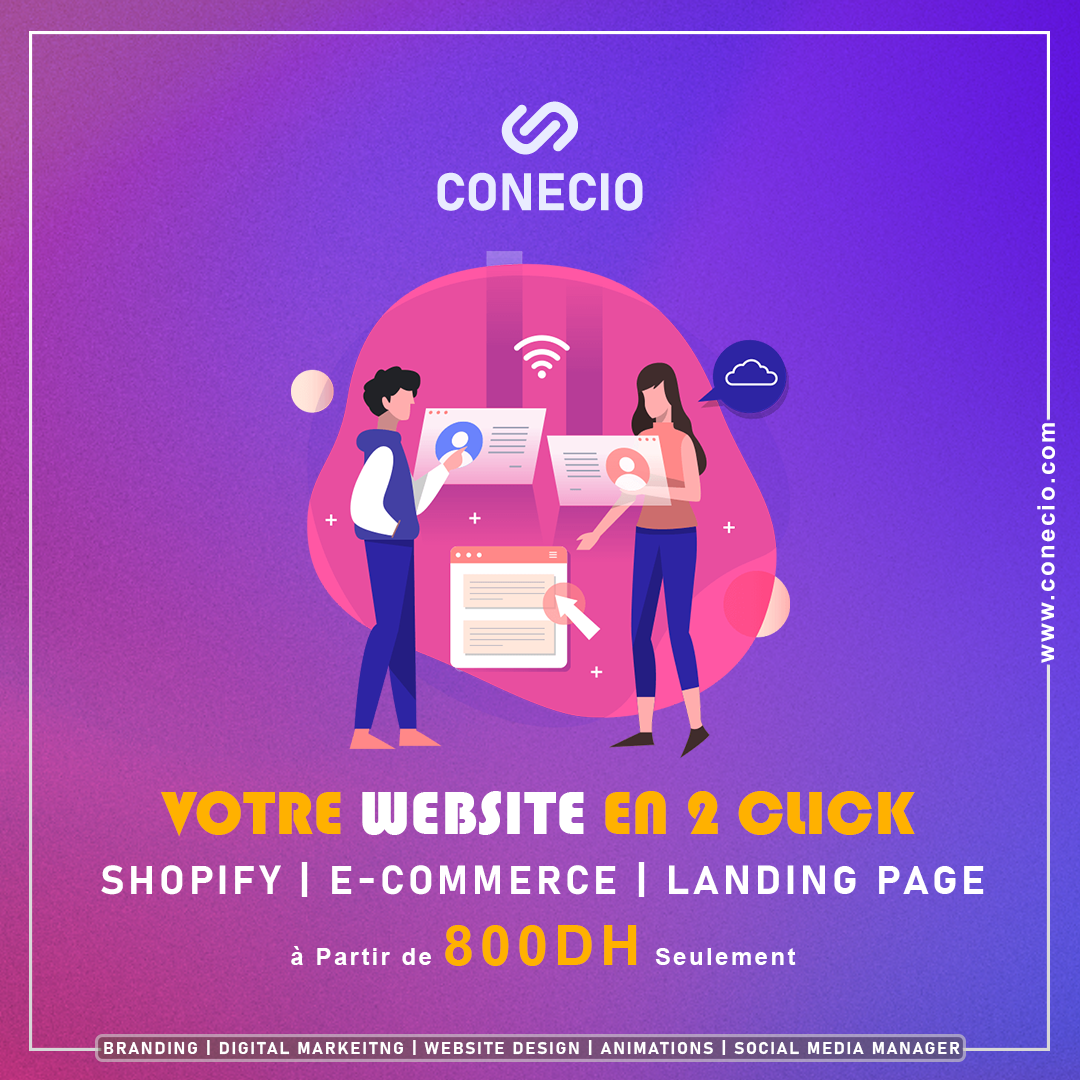
<style>
.page{position:relative;width:1080px;height:1080px}
.page>*{position:absolute;margin:0}
.t1{font:24px "Arial-BoldMT";letter-spacing:0.1em;color:#ffffff}
.t2{font:63px "Bauhaus93";color:#ffb100}
.t3{font:63px "Bauhaus93";color:#ffffff}
.t4{font:40px "Bahnschrift-Bold";letter-spacing:0.1em;color:#ffffff}
.t5{font:56px "Arial-BoldMT";letter-spacing:0.1em;color:#ffb100}
.t6{font:17px "Bahnschrift-Bold";letter-spacing:0.1em;color:#ffffff}
</style>
<div class="page">
<p class="t1" style="left:1037px;top:423px;width:18px;height:240px;rotate:-90deg">www.conecio.com</p>
<p class="t2" style="left:161px;top:791px;width:754px;height:46px">VOTRE <span class="t3">WEBSITE</span> EN 2 CLICK</p>
<p class="t4" style="left:101px;top:862px;width:883px;height:35px">SHOPIFY | E-COMMERCE | LANDING PAGE</p>
<p class="t1" style="left:291px;top:925px;width:505px;height:41px">à Partir de <span class="t5">800DH</span> Seulement</p>
<p class="t6" style="left:104px;top:1040px;width:856px;height:15px">BRANDING | DIGITAL MARKEITNG | WEBSITE DESIGN | ANIMATIONS | SOCIAL MEDIA MANAGER</p>
</div>
